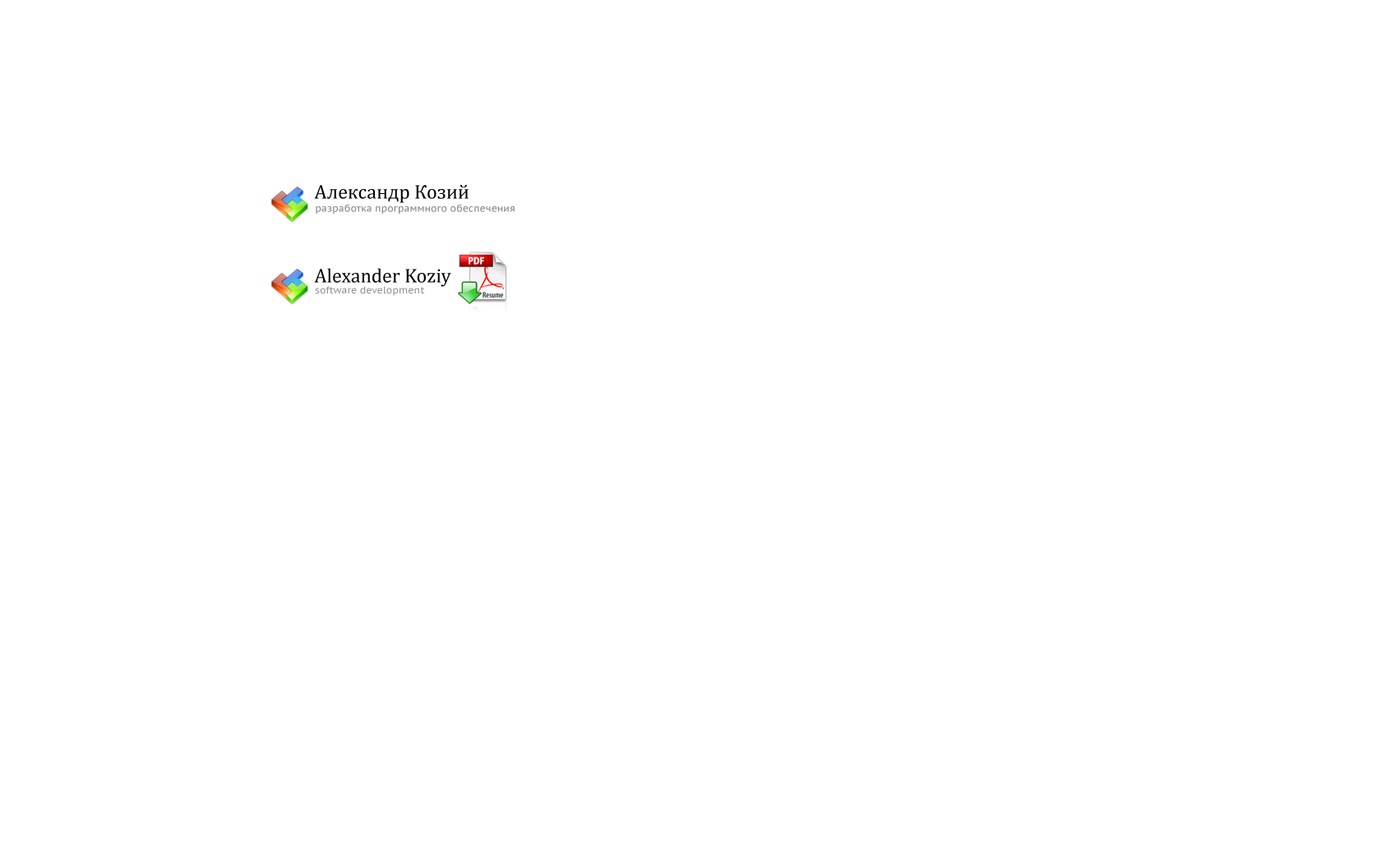
<style>
.page{position:relative;width:1381px;height:863px;background:#ffffff}
.page>*{position:absolute;margin:0}
.t1{font:19.7px/24.7px "Cambria";color:#000000}
.t2{font:9.9px "PTSans-Caption";color:#8c8888}
.t3{font:9.9px "PTSans-Caption";color:#989696}
</style>
<div class="page">
<p class="t1" style="left:314px;top:185px;width:155px;height:102px">Александр Козий <br><br><br>Alexander Koziy</p>
<p class="t2" style="left:316px;top:204px;width:199px;height:10px">разработка программного обеспечения</p>
<p class="t3" style="left:315px;top:286px;width:109px;height:10px">software development</p>
</div>
